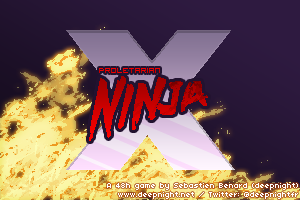
<style>
.page{position:relative;width:300px;height:200px}
.page>*{position:absolute;margin:0}
.t1{font:200px "GillSans-ExtraBoldDisplay"}
.t2{font:68.8px "DeathRattleBB"}
.t3{font:10px "VisitorTT1BRK"}
.t4{font:8px "04b03";color:#ffffff}
</style>
<div class="page">
<p class="t1" style="left:66px;top:30px;width:169px;height:140px">X</p>
<p class="t2" style="left:89px;top:76px;width:119px;height:65px;rotate:-7deg">Ninja</p>
<p class="t3" style="left:99px;top:68px;width:61px;height:5px">Proletarian</p>
<p class="t4" style="left:107px;top:183px;width:191px;height:16px;text-align:right">A 48h game by Sebastien Benard (deepnight)<br>www.deepnight.net / Twitter: @deepnightfr</p>
</div>
